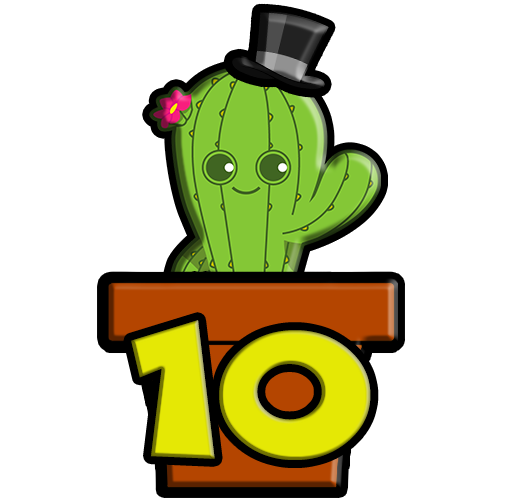
<style>
.page{position:relative;width:520px;height:500px;background:#ffffff}
.page>*{position:absolute;margin:0}
.t1{font:189.8px "Funhouse";color:#e5e805}
</style>
<div class="page">
<p class="t1" style="left:131px;top:320px;width:240px;height:140px">10</p>
</div>
